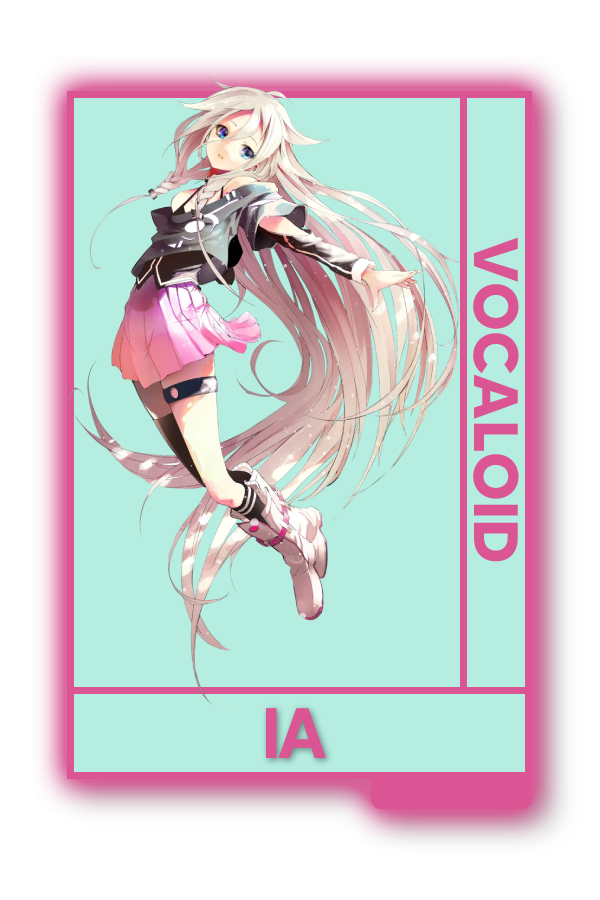
<style>
.page{position:relative;width:600px;height:900px;background:#b5ede1}
.page>*{position:absolute;margin:0}
.t1{font:62.5px "MADETOMMY-Bold";color:#db5493}
.t2{font:75px "CoolveticaRg-Regular";color:#db5493}
</style>
<div class="page">
<p class="t1" style="left:473px;top:237px;width:46px;height:325px;rotate:90deg">VOCALOID</p>
<p class="t2" style="left:265px;top:708px;width:61px;height:50px">IA</p>
</div>
